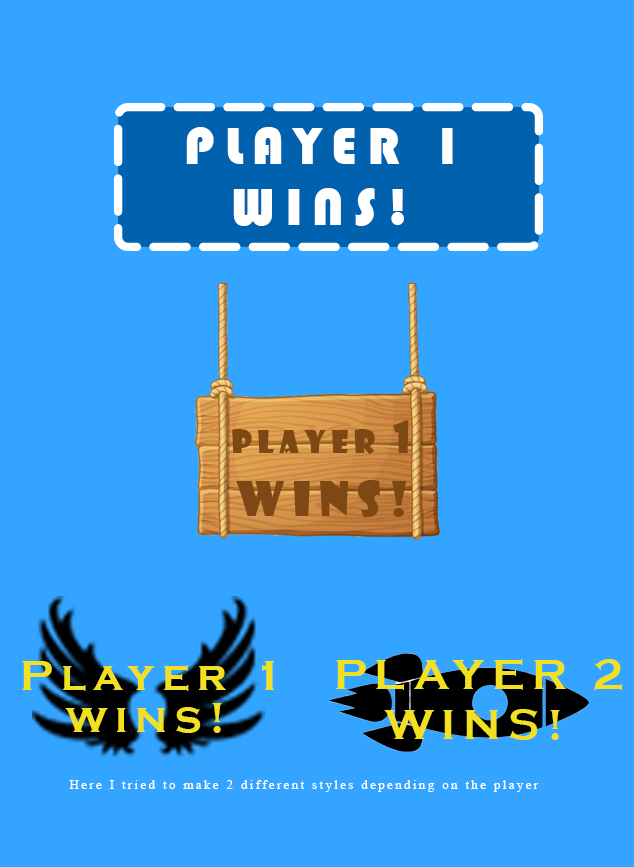
<style>
.page{position:relative;width:634px;height:867px;background:#33a4ff}
.page>*{position:absolute;margin:0}
.t1{font:54px "Bauhaus93";letter-spacing:0.18em;color:#ffffff}
.t2{font:31px "ShowcardGothic-Reg";letter-spacing:0.18em;color:#7d4814}
.t3{font:41.8px "ShowcardGothic-Reg";letter-spacing:0.18em;color:#7d4814}
.t4{font:46.8px "ShowcardGothic-Reg";letter-spacing:0.18em;color:#7d4814}
.t5{font:43px "CopperplateGothic-Bold";letter-spacing:0.18em;color:#f2e122}
.t6{font:13px "TimesNewRomanPSMT";letter-spacing:0.18em;color:#ffffff}
</style>
<div class="page">
<p class="t1" style="left:186px;top:127px;width:267px;height:37px">PLAYER 1</p>
<p class="t1" style="left:233px;top:188px;width:171px;height:38px">WINS!</p>
<p class="t2" style="left:232px;top:420px;width:177px;height:34px">PLAYER <span class="t3">1</span></p>
<p class="t4" style="left:236px;top:480px;width:171px;height:37px">wins!</p>
<p class="t5" style="left:22px;top:661px;width:252px;height:30px">Player 1</p>
<p class="t5" style="left:336px;top:659px;width:286px;height:32px">PLAYER 2</p>
<p class="t5" style="left:65px;top:703px;width:157px;height:30px">wins!</p>
<p class="t5" style="left:384px;top:709px;width:176px;height:31px">WINS!</p>
<p class="t6" style="left:69px;top:780px;width:470px;height:12px">Here I tried to make 2 different styles depending on the player</p>
</div>
